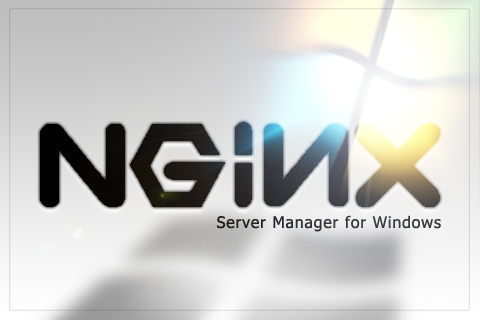
<style>
.page{position:relative;width:480px;height:320px}
.page>*{position:absolute;margin:0}
.t1{font:16px "Tahoma";letter-spacing:0.05em;color:#33323a}
</style>
<div class="page">
<p class="t1" style="left:217px;top:215px;width:224px;height:17px">Server Manager for Windows</p>
</div>
